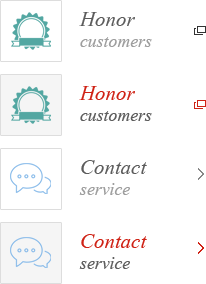
<style>
.page{position:relative;width:206px;height:284px;background:#ffffff}
.page>*{position:absolute;margin:0}
.t1{font:26px "Vijaya";color:#5c5c5c}
.t2{font:22px "Vijaya";color:#9e9e9e}
.t3{font:26px "Vijaya";color:#cf2215}
.t4{font:22px "Vijaya";color:#5e5e5e}
</style>
<div class="page">
<p class="t1" style="left:79px;top:12px;width:56px;height:14px">Honor</p>
<p class="t2" style="left:80px;top:37px;width:72px;height:10px">customers</p>
<p class="t3" style="left:79px;top:86px;width:56px;height:14px">Honor</p>
<p class="t4" style="left:80px;top:111px;width:72px;height:10px">customers</p>
<p class="t1" style="left:81px;top:160px;width:66px;height:14px">Contact</p>
<p class="t2" style="left:79px;top:183px;width:51px;height:12px">service</p>
<p class="t3" style="left:81px;top:234px;width:66px;height:14px">Contact</p>
<p class="t4" style="left:79px;top:257px;width:51px;height:12px">service</p>
</div>
